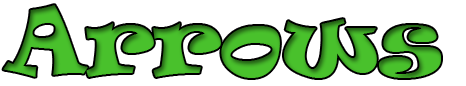
<style>
.page{position:relative;width:466px;height:86px;background:#ffffff}
.page>*{position:absolute;margin:0}
.t1{font:86.8px "Ravie";color:#49c12c}
</style>
<div class="page">
<p class="t1" style="left:3px;top:5px;width:438px;height:73px">Arrows</p>
</div>
